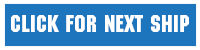
<style>
.page{position:relative;width:200px;height:50px;background:#1d75bd}
.page>*{position:absolute;margin:0}
.t1{font:24px "MachineStd";color:#ffffff}
</style>
<div class="page">
<p class="t1" style="left:11px;top:15px;width:178px;height:17px">Click for Next Ship</p>
</div>
